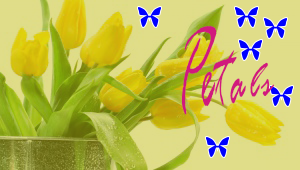
<style>
.page{position:relative;width:300px;height:170px}
.page>*{position:absolute;margin:0}
.t1{font:36px "RageItalic";letter-spacing:0.1em;color:#d1197d}
</style>
<div class="page">
<p class="t1" style="left:181px;top:25px;width:93px;height:90px">Petals</p>
</div>
